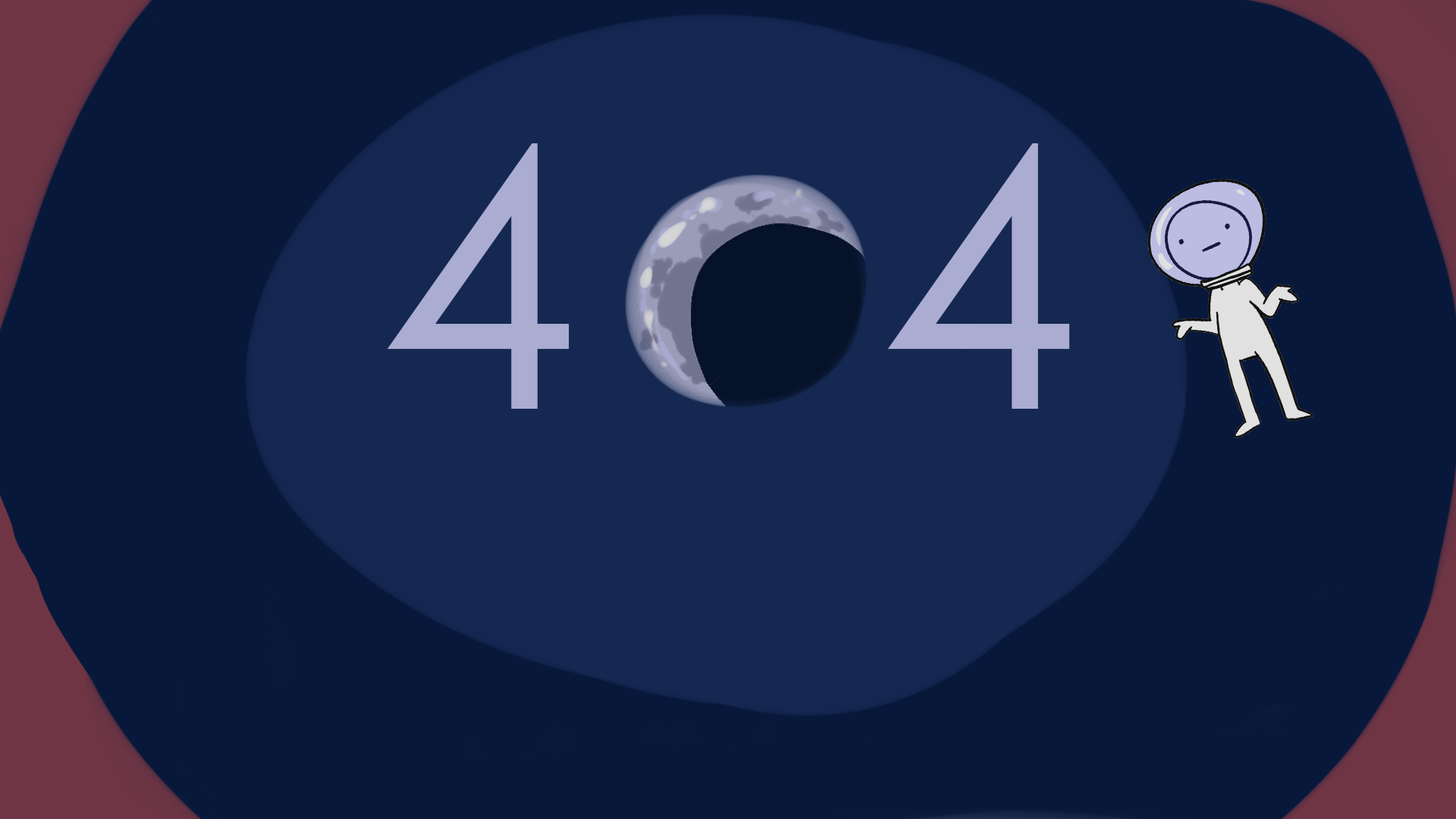
<style>
.page{position:relative;width:1456px;height:819px;background:#08183a}
.page>*{position:absolute;margin:0}
.t1{font:361.2px "CenturyGothic";color:#aaacd2}
</style>
<div class="page">
<p class="t1" style="left:388px;top:143px;width:682px;height:266px">4   4</p>
</div>
